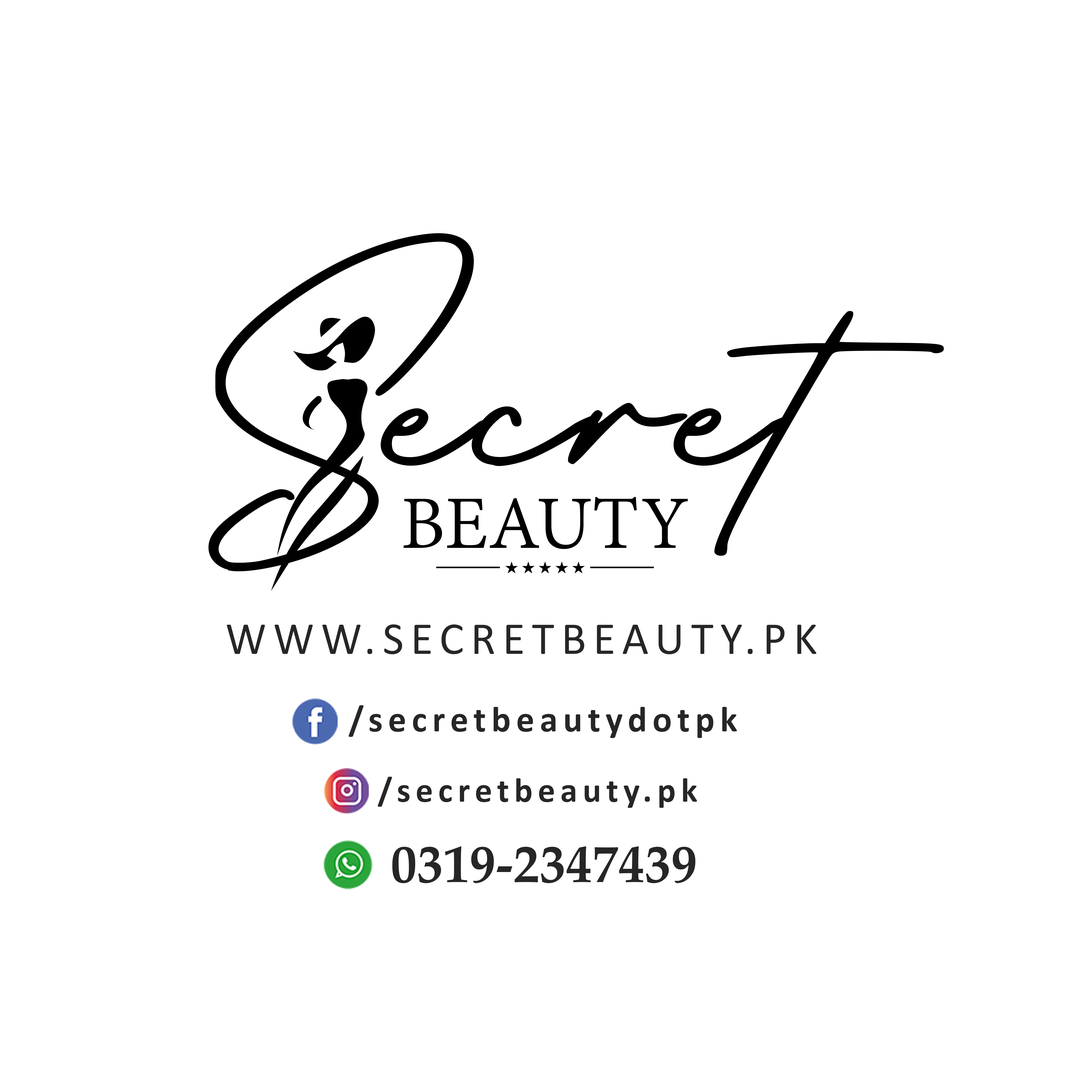
<style>
.page{position:relative;width:1092px;height:1092px;background:#ffffff}
.page>*{position:absolute;margin:0}
.t1{font:45.9px "Calibri";letter-spacing:0.15em;color:#262626;text-transform:uppercase}
.t2{font:36.1px "Calibri-Bold";letter-spacing:0.15em;color:#262626}
.t3{font:34.5px "Calibri-Bold";letter-spacing:0.15em;color:#262626}
.t4{font:52.6px "PalatinoLinotype-Bold";color:#262626}
</style>
<div class="page">
<p class="t1" style="left:227px;top:624px;width:589px;height:30px">www.secretbeauty.pk</p>
<p class="t2" style="left:349px;top:705px;width:388px;height:33px">/secretbeautydotpk</p>
<p class="t3" style="left:378px;top:777px;width:319px;height:31px">/secretbeauty.pk</p>
<p class="t4" style="left:392px;top:846px;width:303px;height:37px">0319-2347439</p>
</div>
